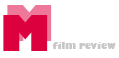
<style>
.page{position:relative;width:119px;height:58px;background:#ffffff}
.page>*{position:absolute;margin:0}
.t1{font:48px "GillSans-UltraBold";color:#dd003f}
.t2{font:9px "GillSans-UltraBold";color:#c7c7c7}
</style>
<div class="page">
<p class="t1" style="left:3px;top:15px;width:45px;height:36px">M</p>
<p class="t2" style="left:52px;top:42px;width:64px;height:7px">film review</p>
</div>
